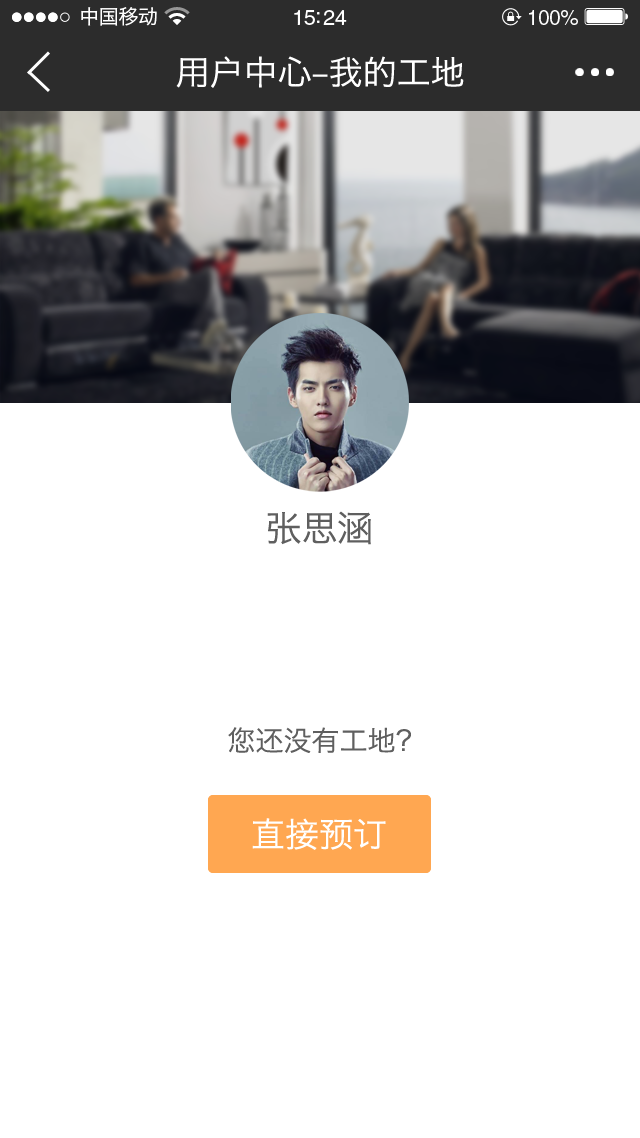
<style>
.page{position:relative;width:640px;height:1138px;background:#ffffff}
.page>*{position:absolute;margin:0}
.t1{font:20px "HiraginoSansGB-W3";letter-spacing:-0.02em;color:#ffffff}
.t2{font:21.5px "HelveticaLTStd-Roman";letter-spacing:-0.02em;color:#ffffff}
.t3{font:20.6px "HelveticaLTStd-Roman";letter-spacing:-0.02em;color:#ffffff}
.t4{font:34px "HiraginoSansGB-W3";color:#ffffff}
.t5{font:36px "HiraginoSansGB-W3";color:#5f5f5f}
.t6{font:28px "HiraginoSansGB-W3";color:#5f5f5f}
</style>
<div class="page">
<p class="t1" style="left:81px;top:7px;width:76px;height:19px">中国移动</p>
<p class="t2" style="left:294px;top:10px;width:53px;height:15px">15:24</p>
<p class="t3" style="left:529px;top:10px;width:49px;height:15px">100%</p>
<p class="t4" style="left:176px;top:56px;width:288px;height:32px">用户中心-我的工地</p>
<p class="t5" style="left:267px;top:511px;width:104px;height:34px">张思涵</p>
<p class="t6" style="left:228px;top:727px;width:183px;height:26px">您还没有工地？</p>
<p class="t4" style="left:252px;top:818px;width:134px;height:32px">直接预订</p>
</div>
